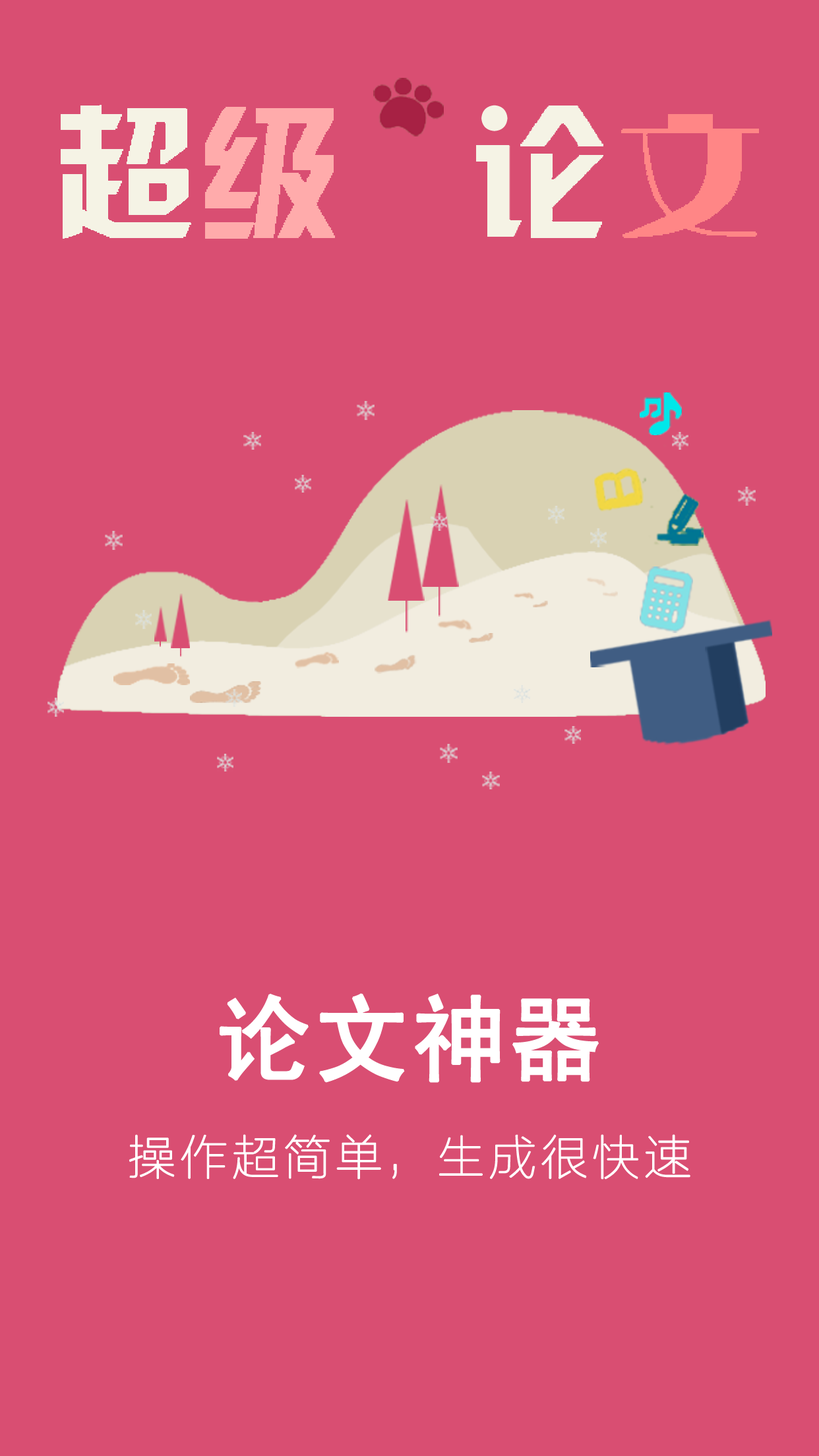
<style>
.page{position:relative;width:819px;height:1456px;background:#d94e72}
.page>*{position:absolute;margin:0}
.t1{font:34.3px "FZLTCXHJW--GB1-0";letter-spacing:0.1em;color:#f5f3e5;font-weight:bold}
.t2{font:95px "SimHei";letter-spacing:0.05em;color:#ffffff;font-weight:bold}
.t3{font:47.5px "FZLTCXHJW--GB1-0";letter-spacing:0.1em;color:#ffffff;font-weight:bold}
</style>
<div class="page">
<p class="t1" style="left:481px;top:105px;width:27px;height:26px">●</p>
<p class="t2" style="left:220px;top:993px;width:379px;height:90px">论文神器</p>
<p class="t3" style="left:129px;top:1134px;width:561px;height:46px">操作超简单， 生成很快速</p>
</div>
